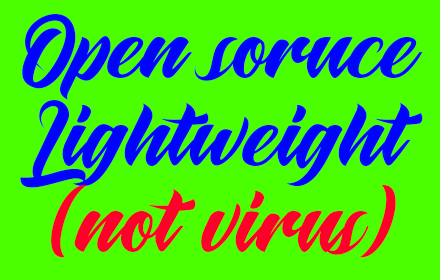
<style>
.page{position:relative;width:440px;height:280px;background:#4cff00}
.page>*{position:absolute;margin:0}
.t1{font:120px "Maghrib";color:#0004ff}
.t2{font:120px "Maghrib";color:#ff002a}
</style>
<div class="page">
<p class="t1" style="left:22px;top:14px;width:401px;height:86px">Open soruce</p>
<p class="t1" style="left:20px;top:100px;width:403px;height:88px">Lightweight</p>
<p class="t2" style="left:51px;top:185px;width:345px;height:73px">(not virus)</p>
</div>
